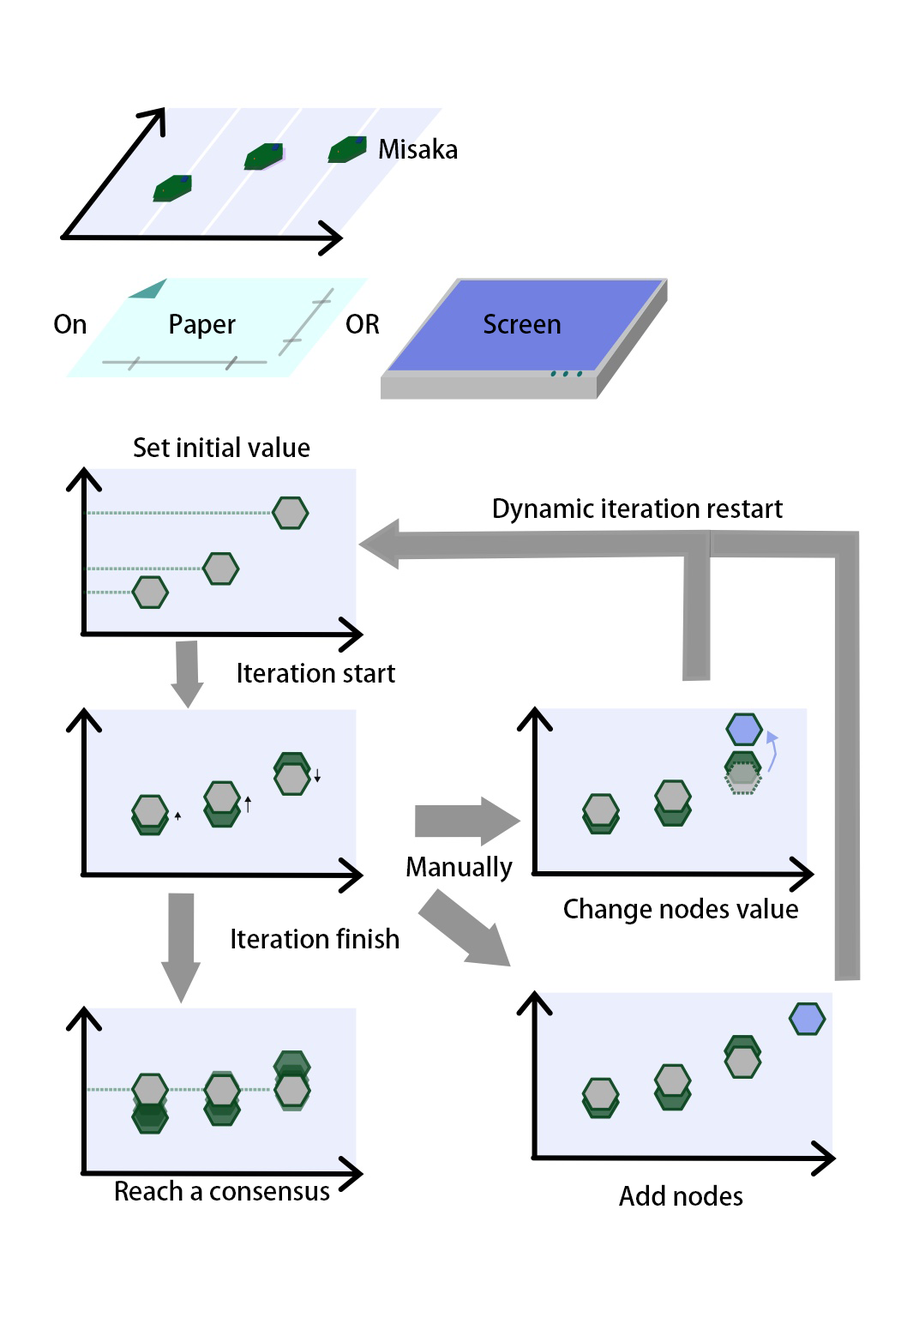
<style>
.page{position:relative;width:901px;height:1324px;background:#ffffff}
.page>*{position:absolute;margin:0}
.t1{font:25.7px "AdobeHeitiStd-Regular";color:#000000}
</style>
<div class="page">
<p class="t1" style="left:379px;top:137px;width:79px;height:22px">Misaka</p>
<p class="t1" style="left:54px;top:314px;width:507px;height:25px">On              Paper                   OR                  Screen</p>
<p class="t1" style="left:134px;top:436px;width:176px;height:21px">Set initial value</p>
<p class="t1" style="left:494px;top:498px;width:289px;height:26px">Dynamic iteration restart</p>
<p class="t1" style="left:238px;top:663px;width:157px;height:19px">Iteration start</p>
<p class="t1" style="left:406px;top:856px;width:107px;height:26px">Manually</p>
<p class="t1" style="left:564px;top:897px;width:234px;height:27px">Change nodes value</p>
<p class="t1" style="left:231px;top:927px;width:168px;height:21px">Iteration finish</p>
<p class="t1" style="left:116px;top:1179px;width:214px;height:21px">Reach a consensus</p>
<p class="t1" style="left:619px;top:1184px;width:124px;height:21px">Add nodes</p>
</div>
